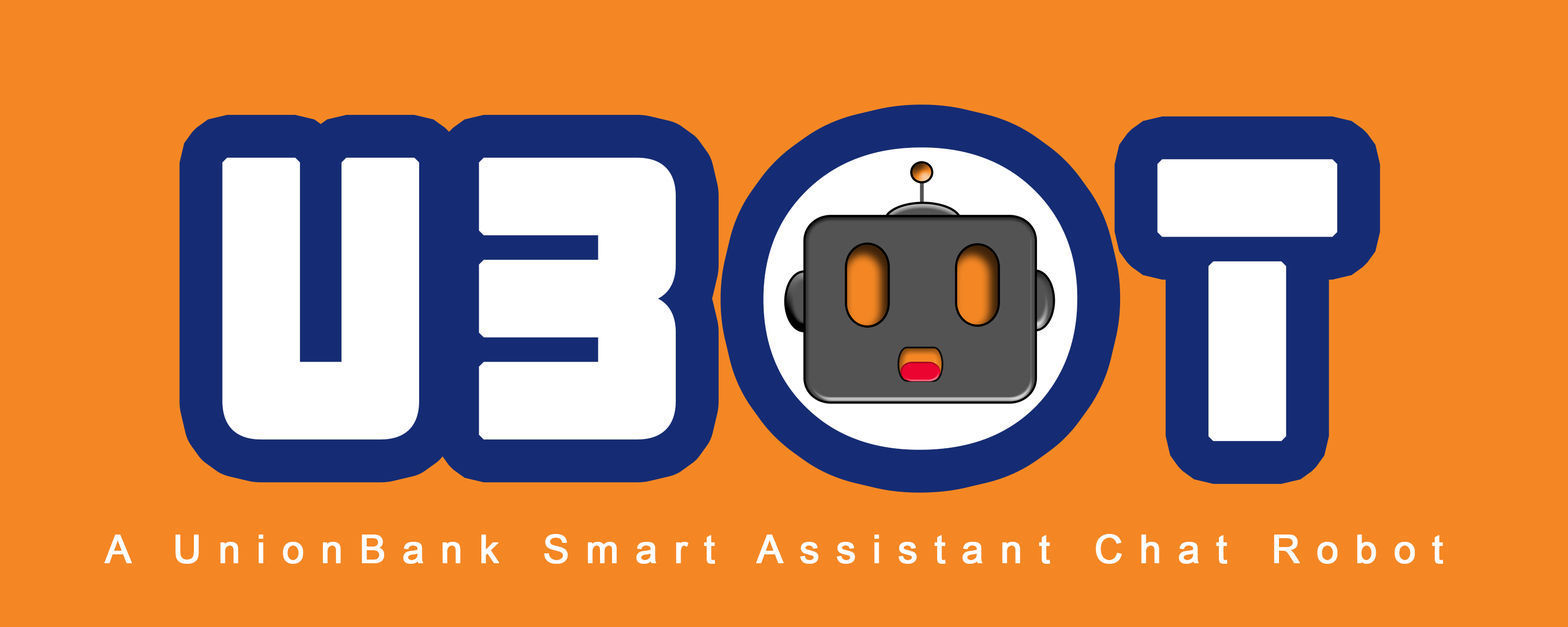
<style>
.page{position:relative;width:1568px;height:627px;background:#f48724}
.page>*{position:absolute;margin:0}
.t1{font:413.8px "BookmanOldStyle-Bold";letter-spacing:0.075em;font-weight:bold}
.t2{font:348.4px "AlienAndroid";letter-spacing:0.075em;color:#ffffff;font-weight:bold}
.t3{font:39.2px "ArialMT";letter-spacing:0.4em;color:#ffffff;font-weight:bold}
</style>
<div class="page">
<p class="t1" style="left:763px;top:147px;width:315px;height:303px">O</p>
<p class="t2" style="left:222px;top:157px;width:454px;height:283px">uB</p>
<p class="t2" style="left:1157px;top:159px;width:181px;height:283px">T</p>
<p class="t3" style="left:104px;top:534px;width:1340px;height:30px">A UnionBank Smart Assistant Chat Robot</p>
</div>
